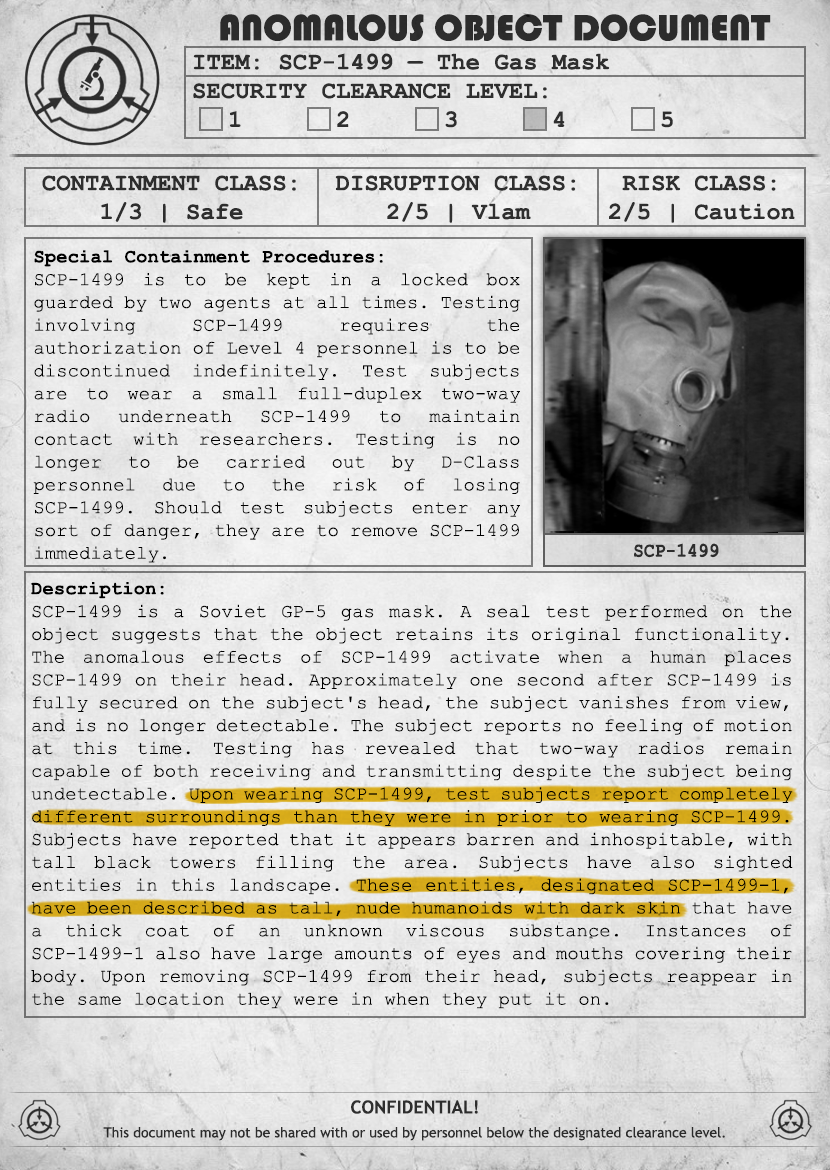
<style>
.page{position:relative;width:830px;height:1170px}
.page>*{position:absolute;margin:0}
.t1{font:38px "Bauhaus93";color:#333333;text-transform:uppercase}
.t2{font:24px "CourierNewPS-BoldMT";color:#333333}
.t3{font:24px "CourierNewPS-BoldMT";color:#333333;text-transform:uppercase}
.t4{font:19px "CourierNewPSMT";color:#000000}
.t5{font:19px "CourierNewPS-BoldMT";color:#000000}
.t6{font:20.1px "CourierNewPS-BoldMT";color:#333333;scale:0.9 1}
.t7{font:14px/24px "TrebuchetMS";color:#333333}
.t8{font:18px/24px "TrebuchetMS-Bold";color:#333333}
</style>
<div class="page">
<p class="t1" style="left:220px;top:14px;width:551px;height:27px">anomalous object document</p>
<p class="t2" style="left:193px;top:53px;width:480px;height:75px">ITEM: SCP-1499 — The Gas Mask<br><span class="t3">Security CLEARANCE LEVEL:</span> <br> 1   2   3   4   5</p>
<p class="t2" style="left:42px;top:175px;width:254px;height:48px;text-align:center">CONTAINMENT CLASS:<br>1/3 | Safe</p>
<p class="t2" style="left:335px;top:175px;width:241px;height:48px;text-align:center">DISRUPTION CLASS:<br>2/5 | Vlam</p>
<p class="t2" style="left:609px;top:175px;width:186px;height:48px;text-align:center">RISK CLASS:<br>2/5 | Caution</p>
<p class="t4" style="left:33px;top:250px;width:487px;height:313px;text-align:justify"><span class="t5">Special Containment Procedures:<br></span>SCP-1499 is to be kept in a locked box guarded by two agents at all times. Testing involving SCP-1499 requires the authorization of Level 4 personnel is to be discontinued indefinitely. Test subjects are to wear a small full-duplex two-way radio underneath SCP-1499 to maintain contact with researchers. Testing is no longer to be carried out by D-Class personnel due to the risk of losing SCP-1499. Should test subjects enter any sort of danger, they are to remove SCP-1499 immediately.</p>
<p class="t6" style="left:634px;top:543px;width:85px;height:15px">SCP-1499</p>
<p class="t4" style="left:31px;top:582px;width:762px;height:427px;text-align:justify"><span class="t5">Description:<br></span>SCP-1499 is a Soviet GP-5 gas mask. A seal test performed on the object suggests that the object retains its original functionality. The anomalous effects of SCP-1499 activate when a human places SCP-1499 on their head. Approximately one second after SCP-1499 is fully secured on the subject's head, the subject vanishes from view, and is no longer detectable. The subject reports no feeling of motion at this time. Testing has revealed that two-way radios remain capable of both receiving and transmitting despite the subject being undetectable. Upon wearing SCP-1499, test subjects report completely different surroundings than they were in prior to wearing SCP-1499. Subjects have reported that it appears barren and inhospitable, with tall black towers filling the area. Subjects have also sighted entities in this landscape. These entities, designated SCP-1499-1, have been described as tall, nude humanoids with dark skin that have a thick coat of an unknown viscous substance. Instances of SCP-1499-1 also have large amounts of eyes and mouths covering their body. Upon removing SCP-1499 from their head, subjects reappear in the same location they were in when they put it on.</p>
<p class="t7" style="left:103px;top:1100px;width:622px;height:41px;text-align:center"><span class="t8">CONFIDENTIAL!<br></span>This document may not be shared with or used by personnel below the designated clearance level.</p>
</div>
